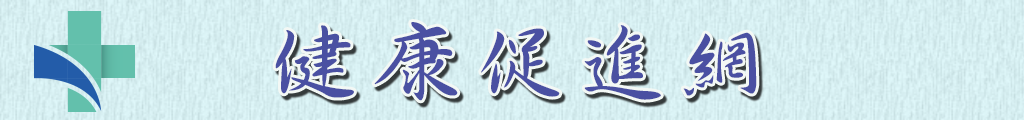
<style>
.page{position:relative;width:1024px;height:120px}
.page>*{position:absolute;margin:0}
.t1{font:86px "DFXingShuStd-W5";letter-spacing:0.2em;color:#4a50a2}
</style>
<div class="page">
<p class="t1" style="left:275px;top:22px;width:482px;height:79px">健康促進網</p>
</div>
